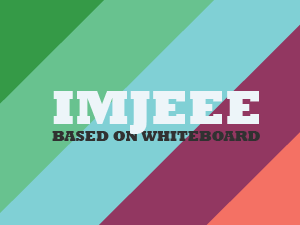
<style>
.page{position:relative;width:300px;height:225px;background:#80d0d5}
.page>*{position:absolute;margin:0}
.t1{font:49.4px "Rockwell-ExtraBold";color:#edf5f9}
.t2{font:14.8px "Rockwell-ExtraBold";color:#313131}
</style>
<div class="page">
<p class="t1" style="left:53px;top:91px;width:206px;height:43px">IMJEEE</p>
<p class="t2" style="left:52px;top:131px;width:208px;height:10px">BASED ON WHITEBOARD</p>
</div>
